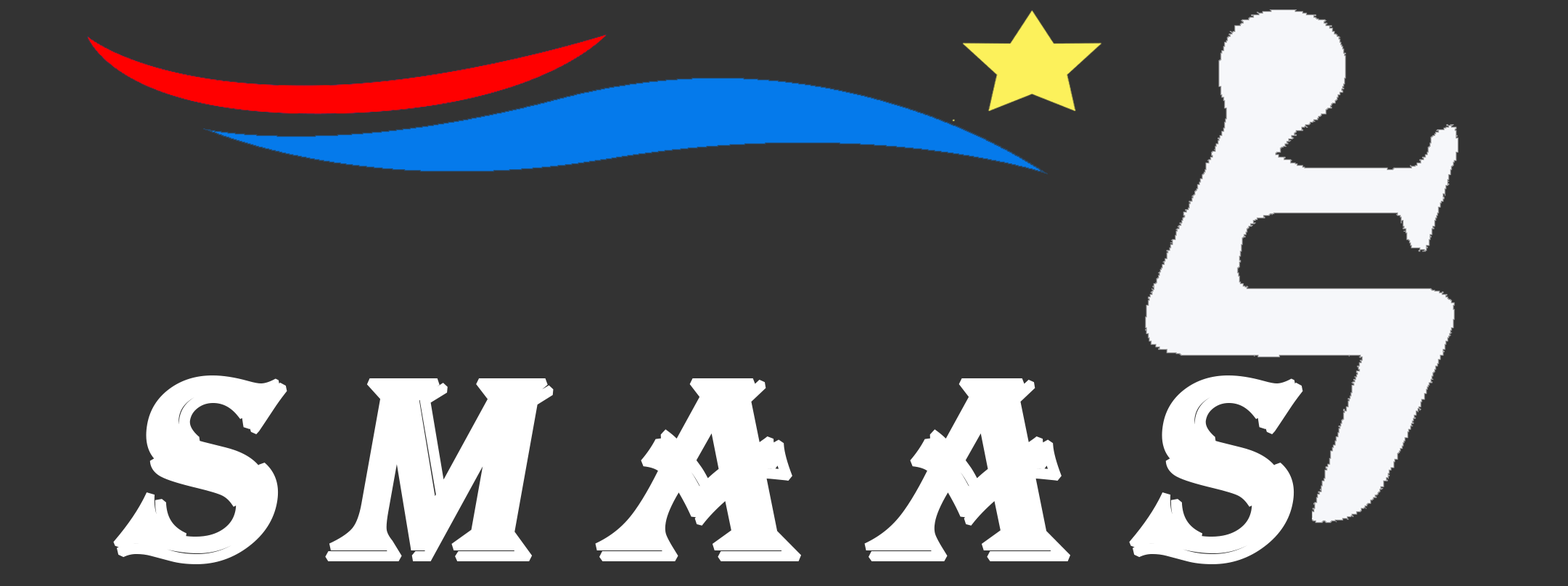
<style>
.page{position:relative;width:1568px;height:586px;background:#333333}
.page>*{position:absolute;margin:0}
.t1{font:263.1px "Algerian";letter-spacing:0.22em;color:#ffffff;font-weight:bold;font-style:italic}
</style>
<div class="page">
<p class="t1" style="left:113px;top:375px;width:1190px;height:189px">SMAAS</p>
</div>
